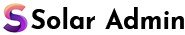
<style>
.page{position:relative;width:185px;height:35px;background:#ffffff}
.page>*{position:absolute;margin:0}
.t1{font:26.7px "JosefinSans-Bold";color:#000000}
</style>
<div class="page">
<p class="t1" style="left:31px;top:7px;width:153px;height:22px">Solar Admin</p>
</div>
